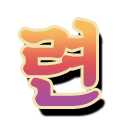
<style>
.page{position:relative;width:128px;height:128px;background:#ffffff}
.page>*{position:absolute;margin:0}
.t1{font:94px "SDKukdetopokki-aLt";letter-spacing:0.12em;font-weight:bold}
</style>
<div class="page">
<p class="t1" style="left:20px;top:20px;width:79px;height:86px">련</p>
</div>
